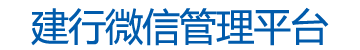
<style>
.page{position:relative;width:360px;height:50px;background:#ffffff}
.page>*{position:absolute;margin:0}
.t1{font:38px "MicrosoftYaHei";letter-spacing:-0.025em;color:#005bac}
</style>
<div class="page">
<p class="t1" style="left:31px;top:7px;width:298px;height:39px">建行微信管理平台</p>
</div>
